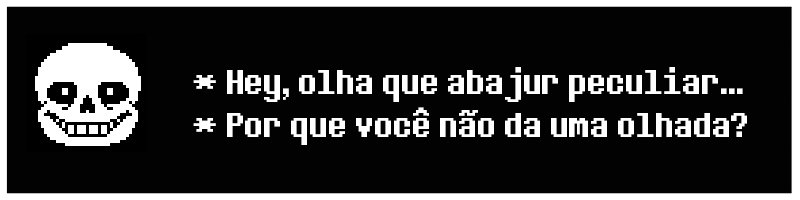
<style>
.page{position:relative;width:800px;height:200px;background:#020202}
.page>*{position:absolute;margin:0}
.t1{font:36px "DeterminationSans";color:#ffffff}
</style>
<div class="page">
<p class="t1" style="left:193px;top:67px;width:554px;height:78px">* Hey, olha que abajur peculiar...<br>* Por que você não da uma olhada?</p>
</div>
